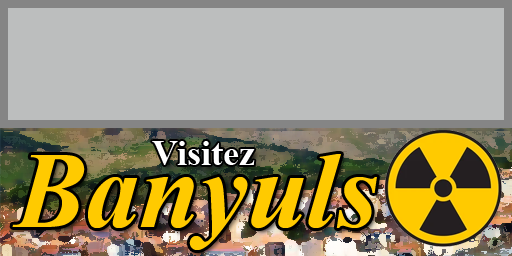
<style>
.page{position:relative;width:512px;height:256px;background:#bcbebe}
.page>*{position:absolute;margin:0}
.t1{font:36px "TimesNewRomanPS-BoldMT";color:#ffffff}
.t2{font:108.3px "TimesNewRomanPS-BoldItalicMT";color:#ffca00}
</style>
<div class="page">
<p class="t1" style="left:152px;top:141px;width:103px;height:24px">Visitez</p>
<p class="t2" style="left:12px;top:154px;width:365px;height:96px">Banyuls</p>
</div>
